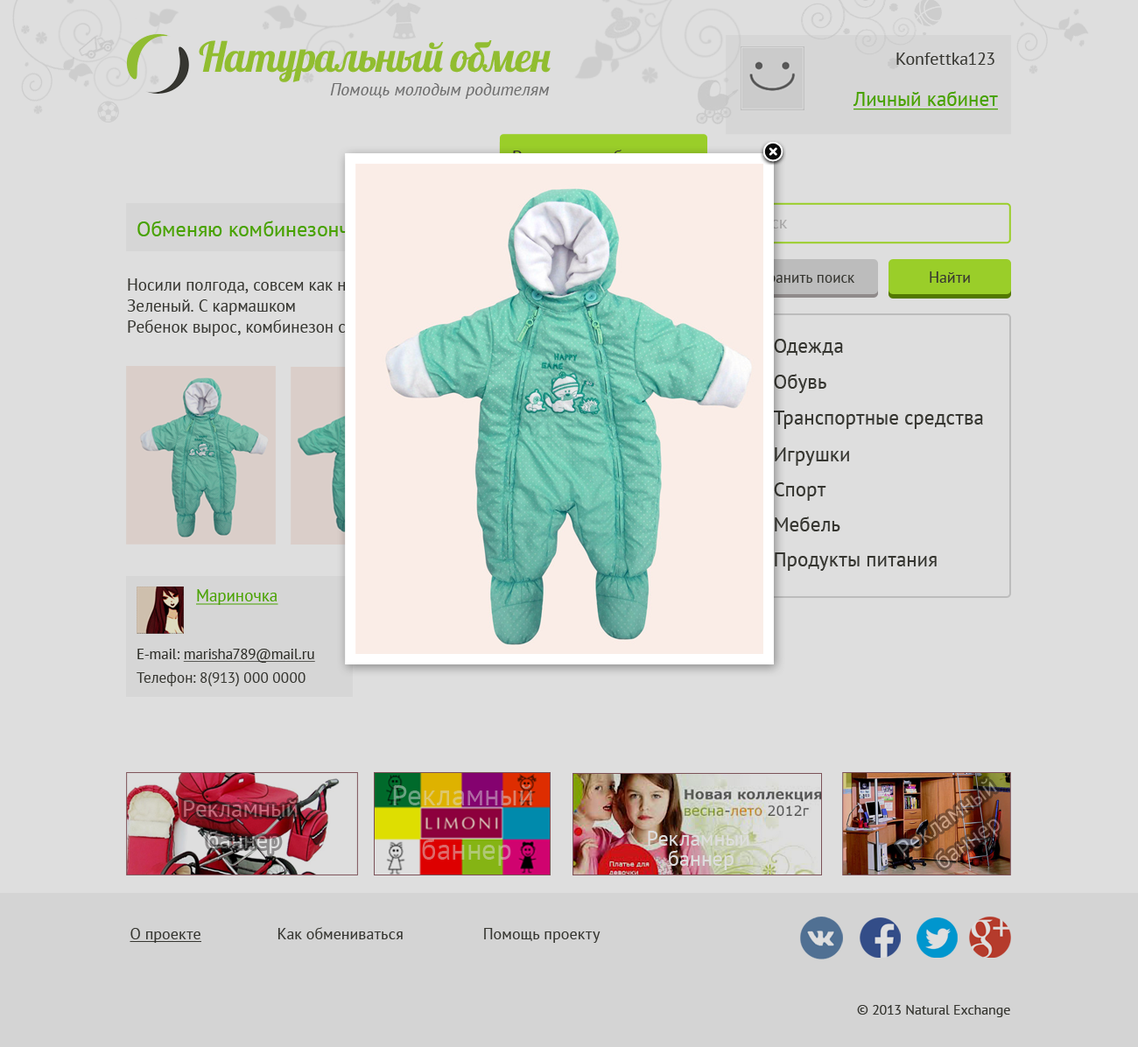
<style>
.page{position:relative;width:1138px;height:1047px;background:#dedede}
.page>*{position:absolute;margin:0}
.t1{font:41.5px "Lobster";letter-spacing:-0.08em;color:#91bd30}
.t2{font:17.5px "PTSans-Regular";color:#3e3e38}
.t3{font:17.5px "PTSans-Italic";color:#7f7f7f}
.t4{font:20.1px "PTSans-Regular";color:#53ba00;text-decoration:underline}
.t5{font:17.5px "PTSans-Regular";color:#ffffff}
.t6{font:21px "PTSans-Regular";color:#53ba00}
.t7{font:16.6px/21px "PTSans-Regular";color:#3e3e38}
.t8{font:14.9px "PTSans-Regular";color:#3e3e38}
.t9{font:15.8px "PTSans-Regular";color:#3e3e38}
.t10{font:20.1px "PTSans-Regular";color:#3e3e38}
.t11{font:16.6px "PTSans-Regular";color:#53ba00;text-decoration:underline}
.t12{font:14.9px/23.6px "PTSans-Regular";color:#3e3e38}
.t13{font:14.9px/23.6px "PTSans-Regular";color:#35352f}
.t14{font:14.9px/23.6px "PTSans-Regular";color:#35352f;text-decoration:underline}
.t15{font:23.7px/31.6px "PTSans-Regular"}
.t16{font:21px/20.1px "PTSans-Regular";color:#dedede}
.t17{font:15.8px "PTSans-Regular";color:#3e3e38;text-decoration:underline}
.t18{font:14px "PTSans-Regular";color:#3e3e38}
</style>
<div class="page">
<p class="t1" style="left:199px;top:40px;width:352px;height:42px">Натуральный  обмен</p>
<p class="t2" style="left:897px;top:53px;width:98px;height:12px">Konfettka123</p>
<p class="t3" style="left:330px;top:83px;width:220px;height:16px">Помощь молодым родителям</p>
<p class="t4" style="left:853px;top:91px;width:145px;height:19px">Личный кабинет</p>
<p class="t5" style="left:513px;top:150px;width:181px;height:13px">Разместить объявление</p>
<p class="t6" style="left:137px;top:221px;width:353px;height:15px">Обменяю комбинезончик на мальчика</p>
<p class="t7" style="left:127px;top:278px;width:345px;height:58px">Носили полгода, совсем как новый!  Размер 18<br>Зеленый. С кармашком<br>Ребенок вырос, комбинезон стал мал.</p>
<p class="t8" style="left:744px;top:272px;width:111px;height:14px">Сохранить поиск</p>
<p class="t9" style="left:930px;top:271px;width:40px;height:12px">Найти</p>
<p class="t10" style="left:774px;top:339px;width:69px;height:17px">Одежда</p>
<p class="t10" style="left:774px;top:374px;width:53px;height:19px">Обувь</p>
<p class="t10" style="left:773px;top:411px;width:210px;height:18px">Транспортные средства</p>
<p class="t10" style="left:775px;top:448px;width:74px;height:18px">Игрушки</p>
<p class="t10" style="left:774px;top:483px;width:53px;height:18px">Спорт</p>
<p class="t10" style="left:775px;top:517px;width:66px;height:15px">Мебель</p>
<p class="t10" style="left:775px;top:553px;width:162px;height:18px">Продукты питания</p>
<p class="t11" style="left:196px;top:589px;width:82px;height:16px">Мариночка</p>
<p class="t12" style="left:137px;top:649px;width:178px;height:38px"><span class="t13">E-mail: </span><span class="t14">marisha789@mail.ru<br></span>Телефон: 8(913) 000 0000</p>
<p class="t15" style="left:896px;top:779px;width:104px;height:90px;text-align:center;rotate:-36deg">Рекламный <br>баннер</p>
<p class="t16" style="left:648px;top:831px;width:102px;height:39px;text-align:center">Рекламный <br>баннер</p>
<p class="t9" style="left:130px;top:927px;width:471px;height:16px"><span class="t17">О проекте</span>       Как обмениваться            Помощь  проекту</p>
<p class="t18" style="left:857px;top:1005px;width:154px;height:13px">© 2013 Natural Exchange</p>
</div>
